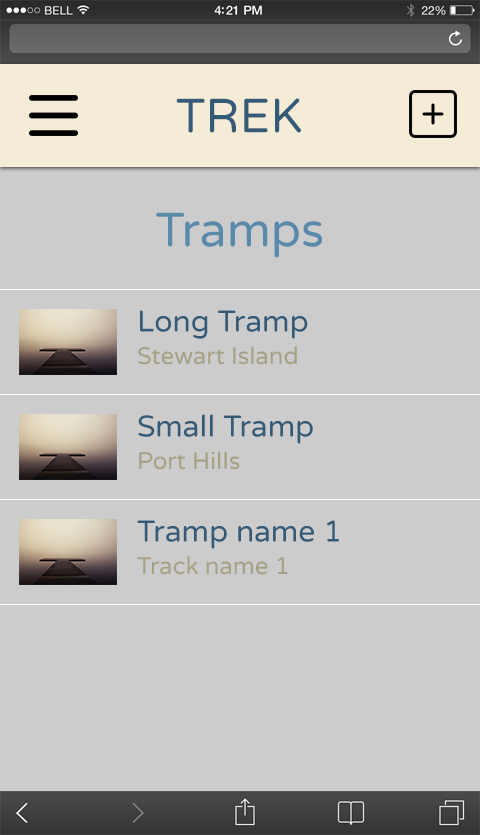
<style>
.page{position:relative;width:480px;height:835px;background:#cccccc}
.page>*{position:absolute;margin:0}
.t1{font:48px "VarelaRound-Regular";color:#335a76;text-transform:uppercase}
.t2{font:48px "VarelaRound-Regular";color:#598aab}
.t3{font:30px "VarelaRound-Regular";color:#335a76}
.t4{font:24px "VarelaRound-Regular";color:#a6a084}
</style>
<div class="page">
<p class="t1" style="left:176px;top:98px;width:125px;height:35px">TREK</p>
<p class="t2" style="left:156px;top:212px;width:166px;height:46px">Tramps</p>
<p class="t3" style="left:140px;top:310px;width:168px;height:29px">Long Tramp</p>
<p class="t4" style="left:138px;top:346px;width:159px;height:19px">Stewart Island</p>
<p class="t3" style="left:138px;top:414px;width:175px;height:30px">Small Tramp</p>
<p class="t4" style="left:139px;top:451px;width:101px;height:19px">Port Hills</p>
<p class="t3" style="left:137px;top:520px;width:202px;height:29px">Tramp name 1</p>
<p class="t4" style="left:137px;top:556px;width:151px;height:19px">Track name 1</p>
</div>
